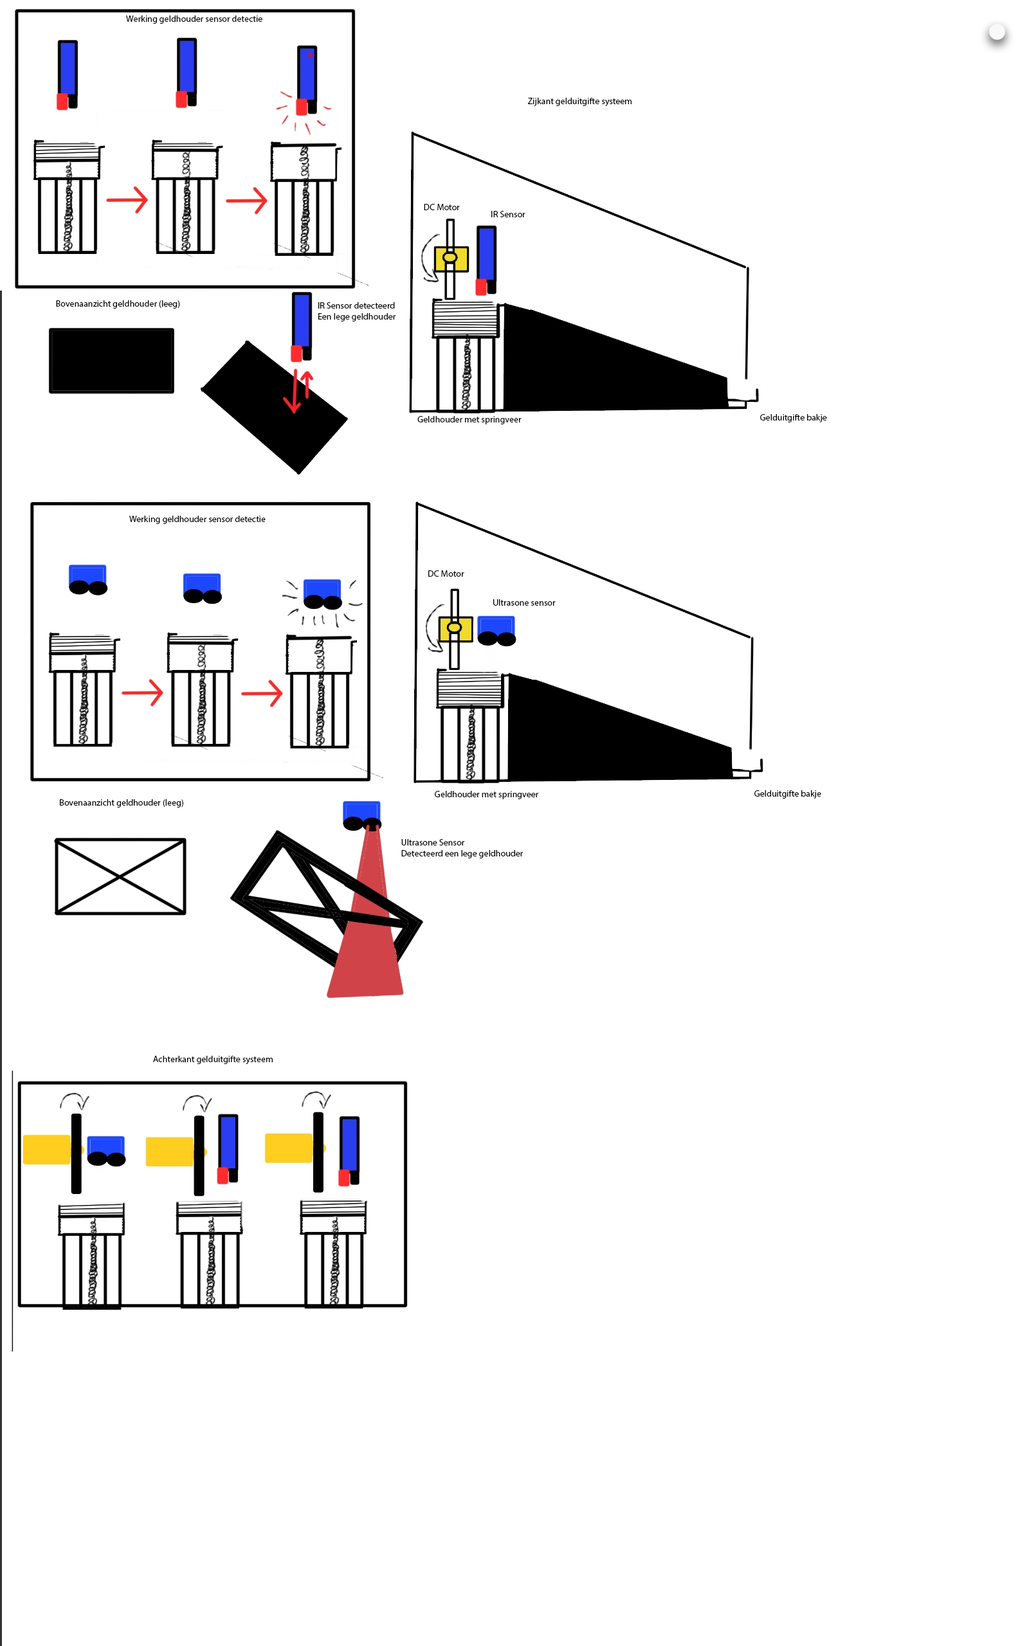
<style>
.page{position:relative;width:1029px;height:1646px;background:#ffffff}
.page>*{position:absolute;margin:0}
.t1{font:9px "MyriadPro-Regular";color:#000000}
</style>
<div class="page">
<p class="t1" style="left:126px;top:15px;width:136px;height:9px">Werking geldhouder sensor detectie</p>
<p class="t1" style="left:527px;top:98px;width:104px;height:8px">Zijkant gelduitgifte systeem</p>
<p class="t1" style="left:424px;top:204px;width:36px;height:6px">DC Motor</p>
<p class="t1" style="left:491px;top:211px;width:34px;height:6px">IR Sensor</p>
<p class="t1" style="left:56px;top:300px;width:124px;height:9px">Bovenaanzicht geldhouder (leeg)</p>
<p class="t1" style="left:318px;top:302px;width:78px;height:19px">IR Sensor detecteerd<br>Een lege geldhouder</p>
<p class="t1" style="left:417px;top:416px;width:104px;height:8px">Geldhouder met springveer</p>
<p class="t1" style="left:760px;top:414px;width:67px;height:8px">Gelduitgifte bakje</p>
<p class="t1" style="left:129px;top:516px;width:137px;height:8px">Werking geldhouder sensor detectie</p>
<p class="t1" style="left:428px;top:570px;width:36px;height:7px">DC Motor</p>
<p class="t1" style="left:493px;top:599px;width:62px;height:7px">Ultrasone sensor</p>
<p class="t1" style="left:435px;top:791px;width:104px;height:8px">Geldhouder met springveer</p>
<p class="t1" style="left:754px;top:790px;width:67px;height:8px">Gelduitgifte bakje</p>
<p class="t1" style="left:60px;top:799px;width:123px;height:8px">Bovenaanzicht geldhouder (leeg)</p>
<p class="t1" style="left:401px;top:839px;width:122px;height:19px">Ultrasone Sensor <br>Detecteerd een lege geldhouder</p>
<p class="t1" style="left:153px;top:1056px;width:120px;height:9px">Achterkant gelduitgifte systeem</p>
</div>
